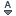
<style>
.page{position:relative;width:16px;height:16px;background:#ffffff}
.page>*{position:absolute;margin:0}
.t1{font:10px "Tahoma";color:#3c4953}
</style>
<div class="page">
<p class="t1" style="left:4px;top:1px;width:7px;height:7px">A</p>
</div>
